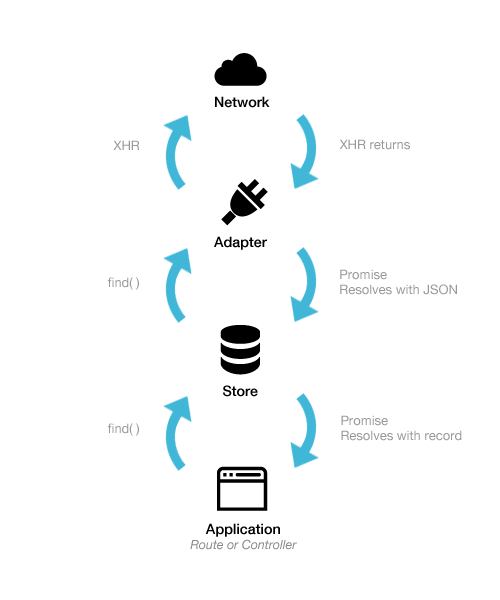
<style>
.page{position:relative;width:500px;height:600px;background:#ffffff}
.page>*{position:absolute;margin:0}
.t1{font:14.4px "HelveticaNeue-Medium";color:#000000}
.t2{font:13px "HelveticaNeue";color:#999999}
.t3{font:12.4px "HelveticaNeue-Italic";color:#898989}
</style>
<div class="page">
<p class="t1" style="left:215px;top:96px;width:55px;height:12px">Network</p>
<p class="t2" style="left:113px;top:140px;width:27px;height:10px">XHR</p>
<p class="t2" style="left:339px;top:139px;width:71px;height:11px">XHR returns</p>
<p class="t1" style="left:214px;top:236px;width:53px;height:14px">Adapter</p>
<p class="t2" style="left:340px;top:269px;width:117px;height:26px">Promise<br>Resolves with JSON</p>
<p class="t2" style="left:107px;top:277px;width:32px;height:13px">find( )</p>
<p class="t1" style="left:223px;top:385px;width:35px;height:12px">Store</p>
<p class="t2" style="left:107px;top:423px;width:32px;height:13px">find( )</p>
<p class="t2" style="left:341px;top:415px;width:121px;height:26px">Promise<br>Resolves with record</p>
<p class="t3" style="left:190px;top:523px;width:107px;height:27px;text-align:center"><span class="t1">Application<br></span>Route or Controller</p>
</div>
